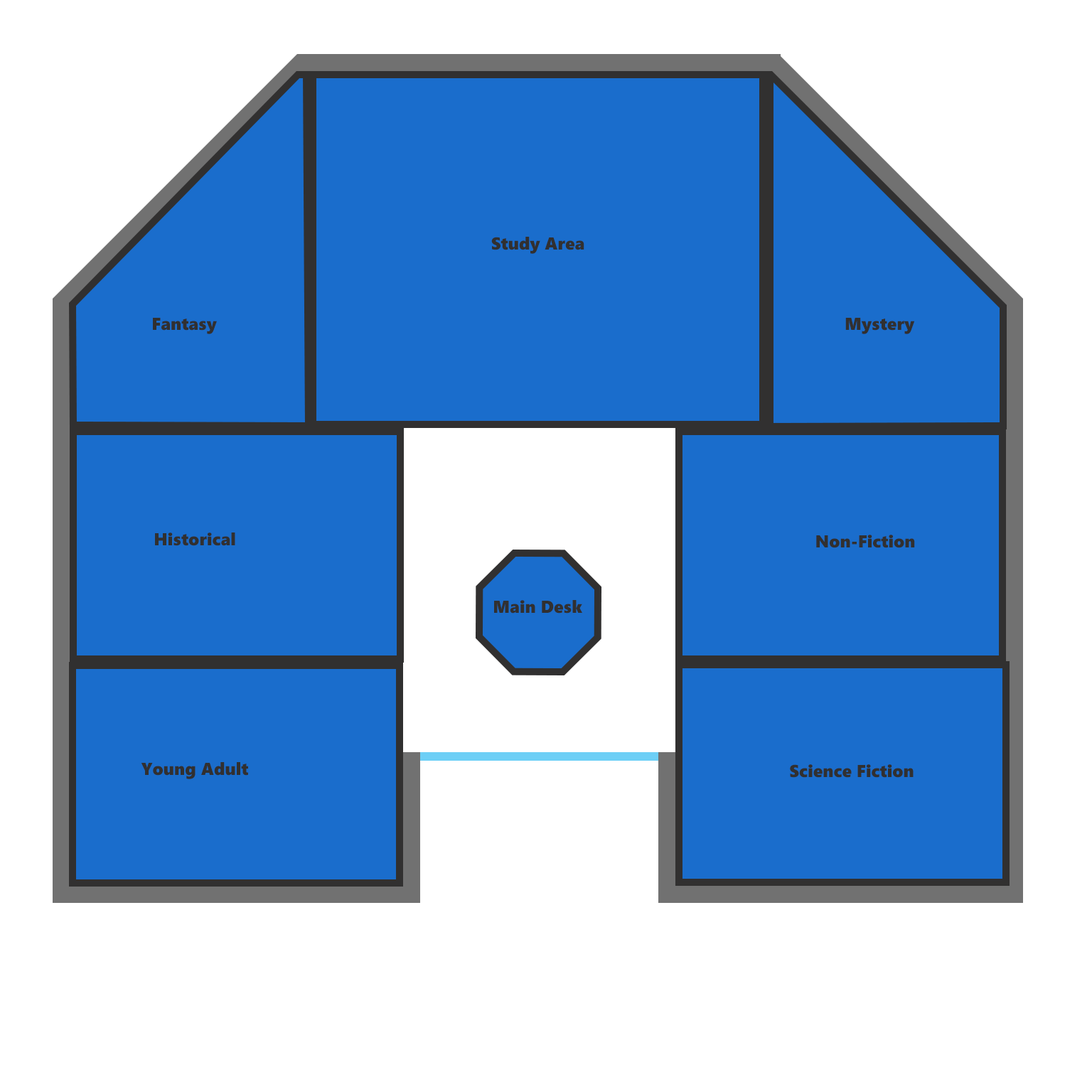
<style>
.page{position:relative;width:1092px;height:1092px;background:#ffffff}
.page>*{position:absolute;margin:0}
.t1{font:17.3px "SegoeUIBlack";color:#313030}
</style>
<div class="page">
<p class="t1" style="left:491px;top:237px;width:93px;height:17px">Study Area</p>
<p class="t1" style="left:153px;top:318px;width:64px;height:16px">Fantasy</p>
<p class="t1" style="left:845px;top:318px;width:70px;height:16px">Mystery</p>
<p class="t1" style="left:155px;top:532px;width:80px;height:14px">Historical</p>
<p class="t1" style="left:816px;top:535px;width:99px;height:13px">Non-Fiction</p>
<p class="t1" style="left:494px;top:600px;width:88px;height:14px">Main Desk</p>
<p class="t1" style="left:141px;top:762px;width:107px;height:17px">Young Adult</p>
<p class="t1" style="left:790px;top:764px;width:124px;height:14px">Science Fiction</p>
</div>
